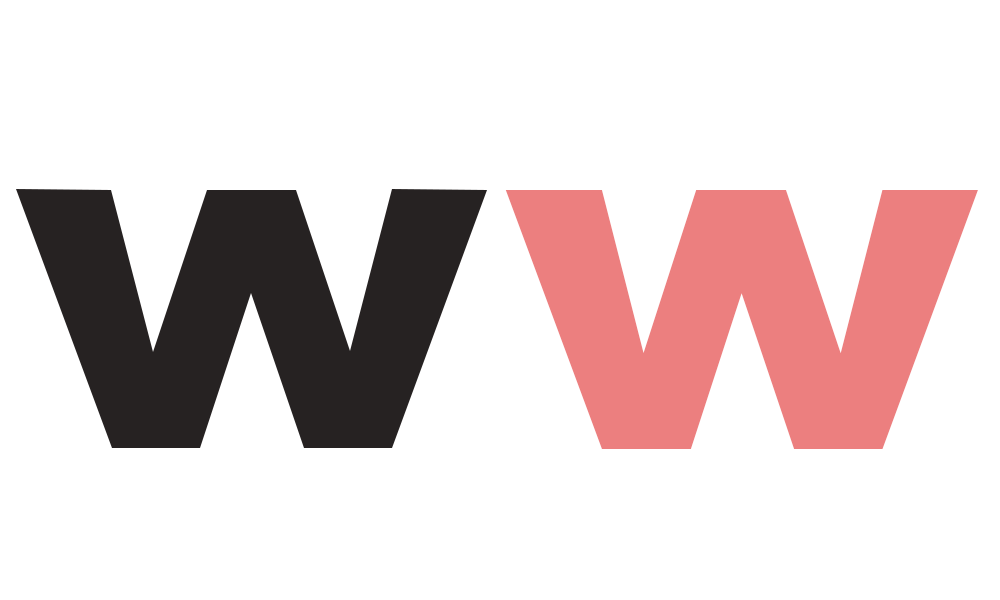
<style>
.page{position:relative;width:1000px;height:600px;background:#ffffff}
.page>*{position:absolute;margin:0}
.t1{font:500px "Arial-Black";color:#ec7f7f}
</style>
<div class="page">
<p class="t1" style="left:505px;top:190px;width:473px;height:259px">w</p>
</div>
